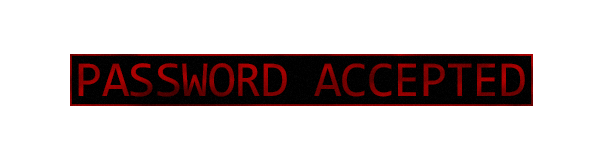
<style>
.page{position:relative;width:600px;height:150px;background:#ffffff}
.page>*{position:absolute;margin:0}
.t1{font:50.5px "Consolas";letter-spacing:-0.02em}
</style>
<div class="page">
<p class="t1" style="left:78px;top:63px;width:447px;height:34px">PASSWORD ACCEPTED</p>
</div>
